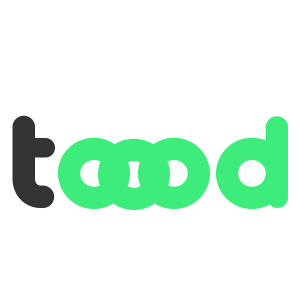
<style>
.page{position:relative;width:300px;height:300px;background:#ffffff}
.page>*{position:absolute;margin:0}
.t1{font:140px "Oduda-Bold";color:#3eec7b}
.t2{font:140px "Oduda-Bold";color:#333333}
</style>
<div class="page">
<p class="t1" style="left:12px;top:115px;width:276px;height:94px"><span class="t2">t</span>ood</p>
<p class="t1" style="left:98px;top:138px;width:72px;height:72px">o</p>
</div>
